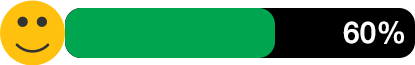
<style>
.page{position:relative;width:415px;height:65px;background:#00a550}
.page>*{position:absolute;margin:0}
.t1{font:30px "HelveticaNeueCyr-Medium";color:#ffffff}
</style>
<div class="page">
<p class="t1" style="left:343px;top:21px;width:61px;height:23px">60%</p>
</div>
